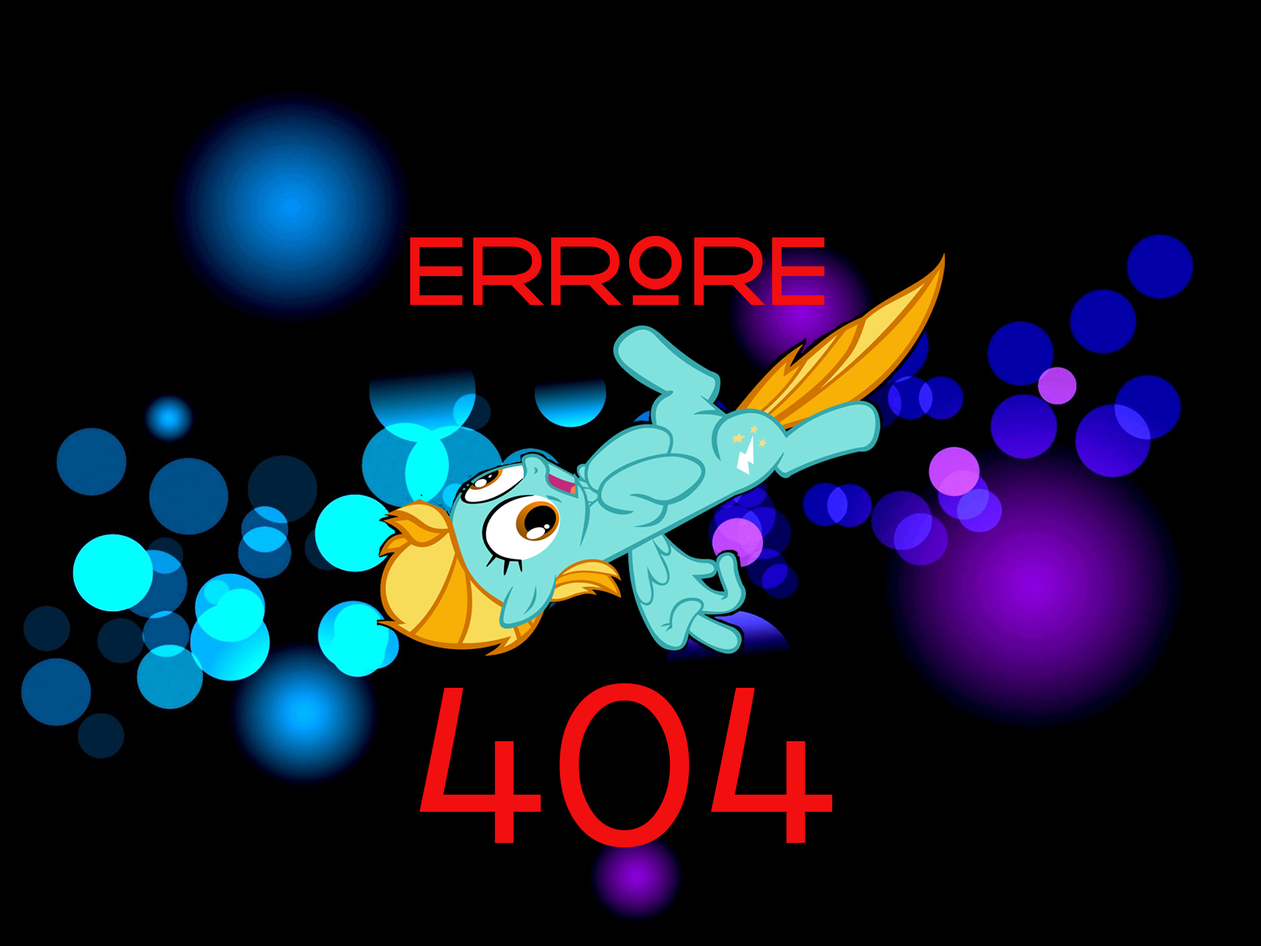
<style>
.page{position:relative;width:1261px;height:946px;background:#000000}
.page>*{position:absolute;margin:0}
.t1{font:122.9px "Radiometry";color:#f20f0f}
.t2{font:240.2px "Raavi";color:#f20f0f}
</style>
<div class="page">
<p class="t1" style="left:410px;top:236px;width:415px;height:69px">errore</p>
<p class="t2" style="left:419px;top:683px;width:413px;height:164px">404</p>
</div>
